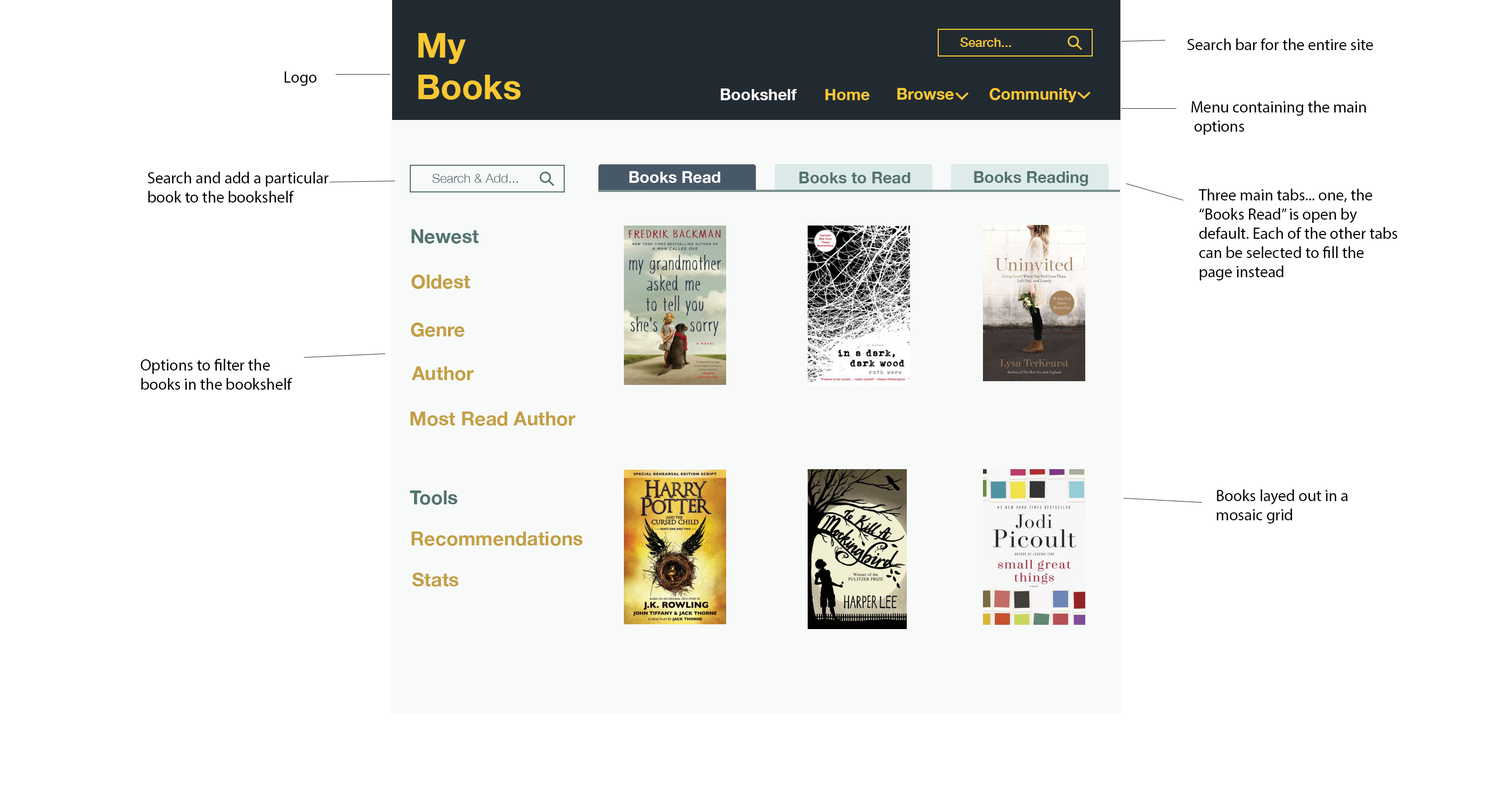
<style>
.page{position:relative;width:1512px;height:789px;background:#ffffff}
.page>*{position:absolute;margin:0}
.t1{font:34.6px "HelveticaNeue-Bold";color:#f8c833}
.t2{font:12.8px "HelveticaNeue-Medium";color:#f8c833}
.t3{font:16px "MyriadPro-Regular";color:#000000}
.t4{font:16px "HelveticaNeue-Bold";color:#ffffff}
.t5{font:16px "HelveticaNeue-Bold";color:#f8c833}
.t6{font:12.8px "HelveticaNeue-Light";color:#537370}
.t7{font:16px "HelveticaNeue-Bold";color:#537370}
.t8{font:19.2px "HelveticaNeue-Bold";color:#537370}
.t9{font:19.2px "HelveticaNeue-Bold";color:#c39f44}
</style>
<div class="page">
<p class="t1" style="left:418px;top:33px;width:103px;height:67px">My <br>Books</p>
<p class="t2" style="left:960px;top:37px;width:51px;height:10px">Search...</p>
<p class="t3" style="left:1187px;top:38px;width:186px;height:12px">Search bar for the entire site</p>
<p class="t3" style="left:285px;top:71px;width:31px;height:15px">Logo</p>
<p class="t4" style="left:721px;top:88px;width:76px;height:12px">Bookshelf</p>
<p class="t5" style="left:825px;top:89px;width:45px;height:11px">Home</p>
<p class="t5" style="left:897px;top:88px;width:57px;height:12px">Browse</p>
<p class="t5" style="left:989px;top:88px;width:88px;height:14px">Community</p>
<p class="t3" style="left:1191px;top:101px;width:175px;height:34px">Menu containing the main<br> options</p>
<p class="t3" style="left:148px;top:172px;width:181px;height:30px">Search and add a particular <br>book to the bookshelf</p>
<p class="t6" style="left:432px;top:174px;width:86px;height:9px">Search &amp; Add...</p>
<p class="t4" style="left:629px;top:171px;width:91px;height:12px">Books Read</p>
<p class="t7" style="left:799px;top:172px;width:112px;height:12px">Books to Read</p>
<p class="t7" style="left:974px;top:171px;width:114px;height:15px">Books Reading</p>
<p class="t3" style="left:1199px;top:189px;width:199px;height:91px">Three main tabs... one, the<br>“Books Read” is open by<br>default. Each of the other tabs<br>can be selected to fill the<br>page instead</p>
<p class="t8" style="left:411px;top:229px;width:68px;height:14px">Newest</p>
<p class="t9" style="left:411px;top:274px;width:59px;height:15px">Oldest</p>
<p class="t9" style="left:411px;top:322px;width:54px;height:15px">Genre</p>
<p class="t3" style="left:141px;top:359px;width:152px;height:30px">Options to filter the<br>books in the bookshelf</p>
<p class="t9" style="left:411px;top:366px;width:63px;height:14px">Author</p>
<p class="t9" style="left:410px;top:411px;width:165px;height:15px">Most Read Author</p>
<p class="t8" style="left:410px;top:490px;width:48px;height:15px">Tools</p>
<p class="t3" style="left:1217px;top:489px;width:131px;height:34px">Books layed out in a <br>mosaic grid</p>
<p class="t9" style="left:411px;top:531px;width:172px;height:15px">Recommendations</p>
<p class="t9" style="left:412px;top:572px;width:47px;height:15px">Stats</p>
</div>
